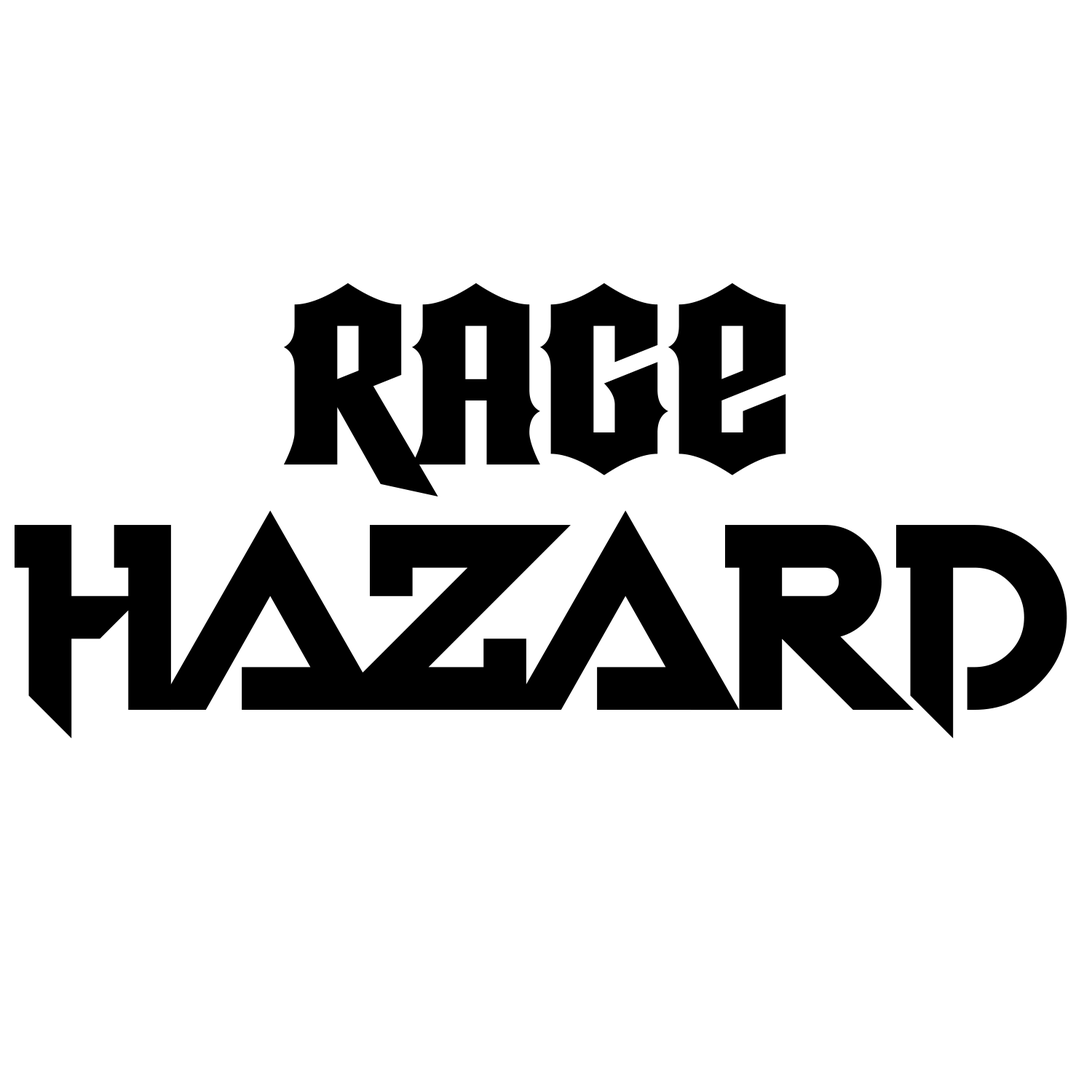
<style>
.page{position:relative;width:1092px;height:1092px;background:#ffffff}
.page>*{position:absolute;margin:0}
.t1{font:218.4px "StringsTheory";color:#000000}
.t2{font:291.2px "VoiceInMyHead";color:#000000}
</style>
<div class="page">
<p class="t1" style="left:284px;top:282px;width:502px;height:214px">Rage</p>
<p class="t2" style="left:15px;top:510px;width:1052px;height:229px">HAZARD</p>
</div>
